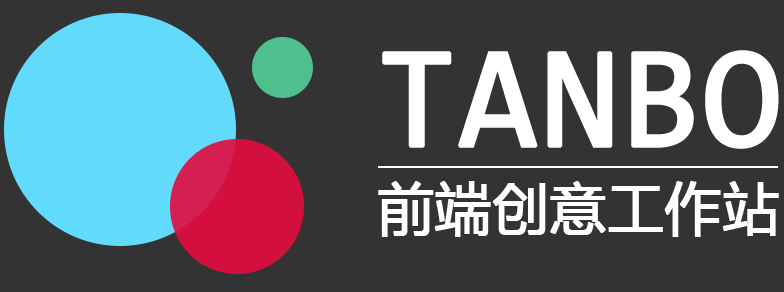
<style>
.page{position:relative;width:784px;height:292px;background:#333333}
.page>*{position:absolute;margin:0}
.t1{font:145.6px "MicrosoftYaHeiMono";color:#ffffff;text-transform:uppercase;font-weight:bold;scale:0.97 1}
.t2{font:56px "MicrosoftYaHeiMono";color:#ffffff;text-transform:uppercase;font-weight:bold}
</style>
<div class="page">
<p class="t1" style="left:382px;top:50px;width:397px;height:99px">tanbo</p>
<p class="t2" style="left:378px;top:181px;width:401px;height:56px">前端创意工作站</p>
</div>
